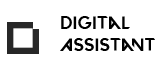
<style>
.page{position:relative;width:155px;height:61px;background:#ffffff}
.page>*{position:absolute;margin:0}
.t1{font:18px "VALORANT-Regular";color:#000000}
</style>
<div class="page">
<p class="t1" style="left:60px;top:16px;width:96px;height:35px">Digital Assistant</p>
</div>
